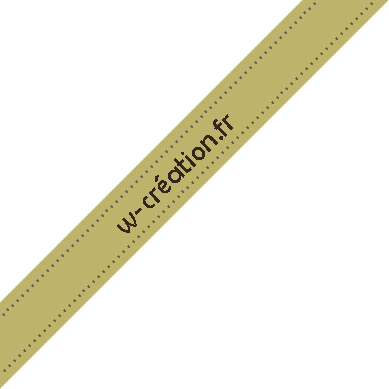
<style>
.page{position:relative;width:389px;height:389px;background:#ffffff}
.page>*{position:absolute;margin:0}
.t1{font:30px "BerlinSansFB-Reg";color:#33261d}
</style>
<div class="page">
<p class="t1" style="left:117px;top:114px;width:116px;height:119px;rotate:-45deg">w-création.fr</p>
</div>
